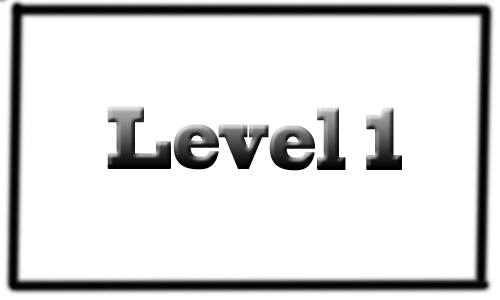
<style>
.page{position:relative;width:500px;height:300px;background:#ffffff}
.page>*{position:absolute;margin:0}
.t1{font:83.3px "BlackoakStd";scale:0.44 1}
</style>
<div class="page">
<p class="t1" style="left:107px;top:106px;width:295px;height:65px">Level 1</p>
</div>
